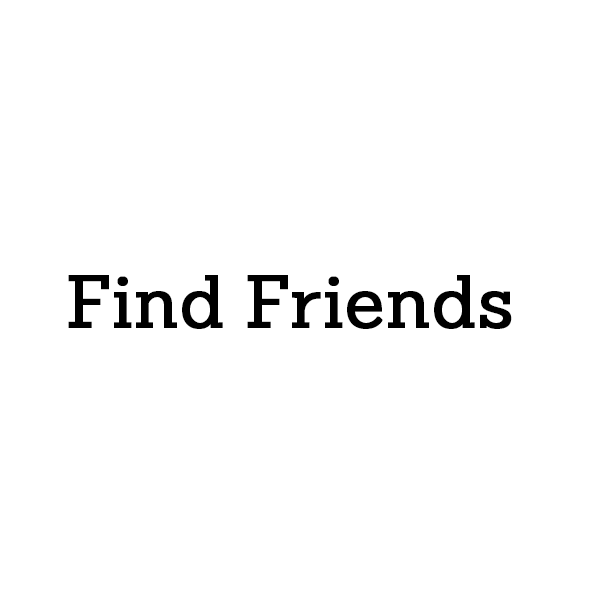
<style>
.page{position:relative;width:600px;height:600px;background:#ffffff}
.page>*{position:absolute;margin:0}
.t1{font:72px "SanchezSlab";color:#000000;font-weight:bold}
</style>
<div class="page">
<p class="t1" style="left:68px;top:275px;width:444px;height:54px">Find Friends</p>
</div>
